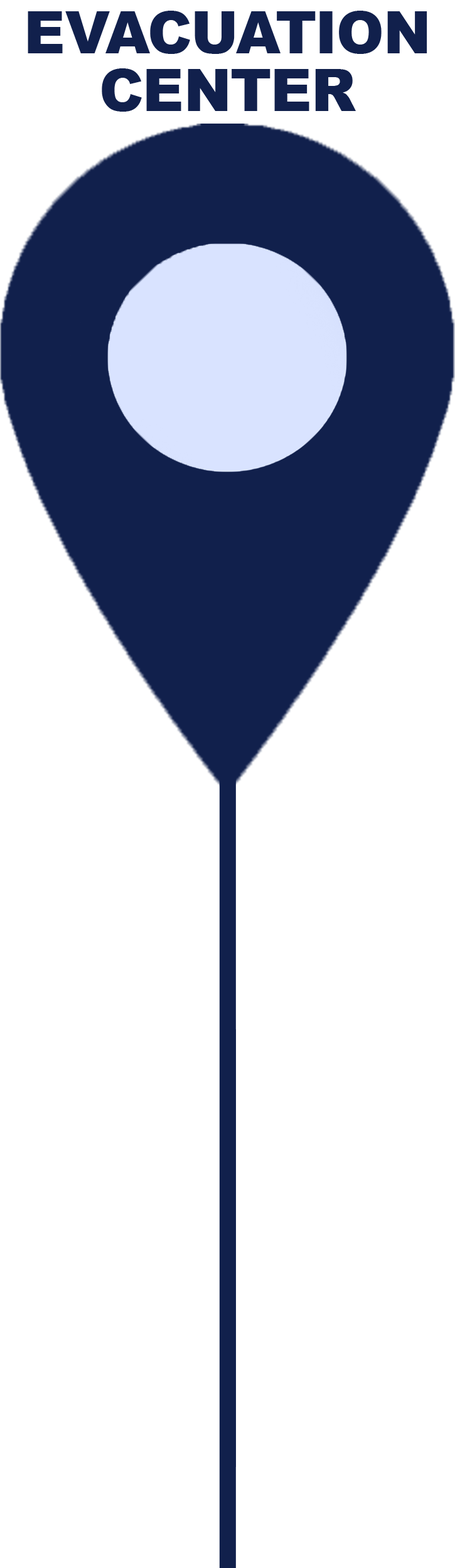
<style>
.page{position:relative;width:455px;height:1568px;background:#ffffff}
.page>*{position:absolute;margin:0}
.t1{font:58.2px/58.2px "Arial-Black";color:#11204c}
</style>
<div class="page">
<p class="t1" style="left:28px;top:11px;width:399px;height:101px;text-align:center">EVACUATION<br>CENTER</p>
</div>
